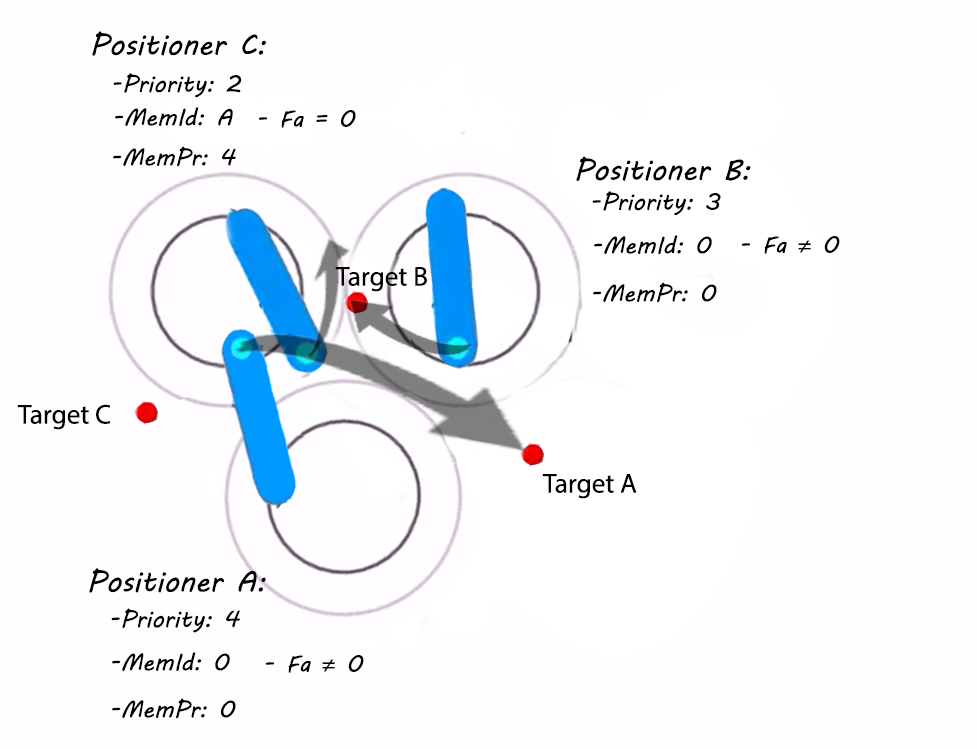
<style>
.page{position:relative;width:977px;height:749px;background:#fffdff}
.page>*{position:absolute;margin:0}
.t1{font:50px "MVBoli";color:#000000}
.t2{font:40px "MVBoli";color:#000000}
.t3{font:40px "MyriadPro-Regular";color:#000000}
.t4{font:46.7px "MyriadPro-Regular";color:#000000}
</style>
<div class="page">
<p class="t1" style="left:92px;top:31px;width:174px;height:25px">Positioner C:</p>
<p class="t2" style="left:113px;top:73px;width:129px;height:25px">-Priority: 2</p>
<p class="t2" style="left:115px;top:107px;width:118px;height:19px">-MemId: A</p>
<p class="t2" style="left:258px;top:110px;width:98px;height:18px">- Fa = 0</p>
<p class="t2" style="left:113px;top:146px;width:123px;height:21px">-MemPr: 4</p>
<p class="t1" style="left:576px;top:156px;width:175px;height:25px">Positioner B:</p>
<p class="t2" style="left:592px;top:191px;width:129px;height:25px">-Priority: 3</p>
<p class="t2" style="left:594px;top:235px;width:118px;height:19px">-MemId: 0</p>
<p class="t2" style="left:741px;top:236px;width:99px;height:18px">- Fa <span class="t3">≠</span> 0</p>
<p class="t4" style="left:335px;top:267px;width:92px;height:25px">Target B</p>
<p class="t2" style="left:593px;top:282px;width:124px;height:21px">-MemPr: 0</p>
<p class="t4" style="left:17px;top:404px;width:94px;height:26px">Target C</p>
<p class="t4" style="left:542px;top:474px;width:95px;height:25px">Target A</p>
<p class="t1" style="left:89px;top:568px;width:177px;height:25px">Positioner A:</p>
<p class="t2" style="left:111px;top:608px;width:129px;height:25px">-Priority: 4</p>
<p class="t2" style="left:112px;top:652px;width:118px;height:19px">-MemId: 0</p>
<p class="t2" style="left:265px;top:655px;width:99px;height:18px">- Fa <span class="t3">≠</span> 0</p>
<p class="t2" style="left:112px;top:698px;width:124px;height:21px">-MemPr: 0</p>
</div>
